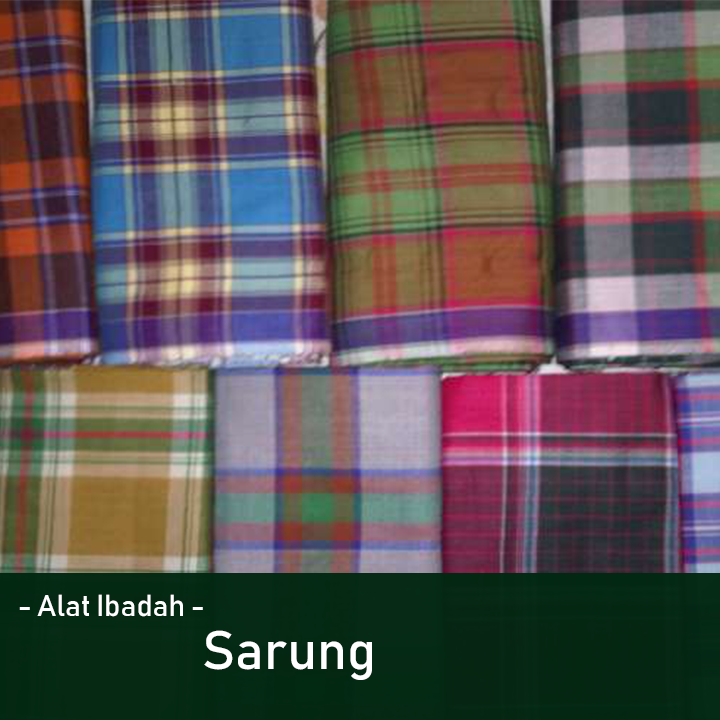
<style>
.page{position:relative;width:720px;height:720px}
.page>*{position:absolute;margin:0}
.t1{font:30px "Bahnschrift";color:#ffffff}
.t2{font:53.6px "Bahnschrift";color:#ffffff}
</style>
<div class="page">
<p class="t1" style="left:19px;top:594px;width:184px;height:23px">- Alat Ibadah -</p>
<p class="t2" style="left:204px;top:630px;width:168px;height:50px">Sarung</p>
</div>
